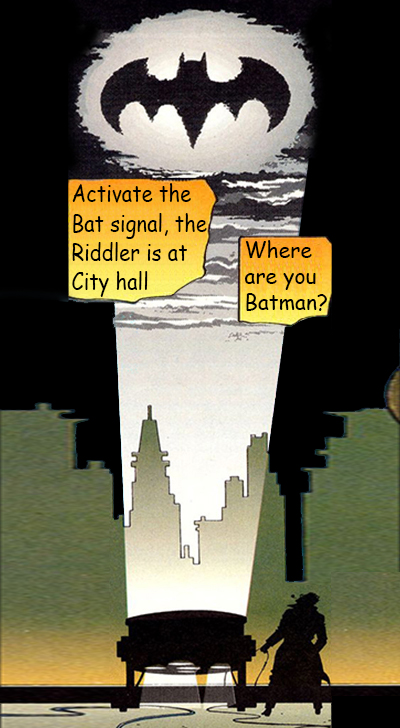
<style>
.page{position:relative;width:400px;height:728px;background:#000000}
.page>*{position:absolute;margin:0}
.t1{font:24.5px "ComicSansMS";color:#000000;scale:0.83 1}
.t2{font:21.7px "ComicSansMS";color:#000000}
</style>
<div class="page">
<p class="t1" style="left:72px;top:183px;width:135px;height:114px">Activate the<br>Bat signal, the <br>Riddler is at<br>City hall</p>
<p class="t2" style="left:244px;top:240px;width:83px;height:71px">Where<br>are you<br>Batman?</p>
</div>
